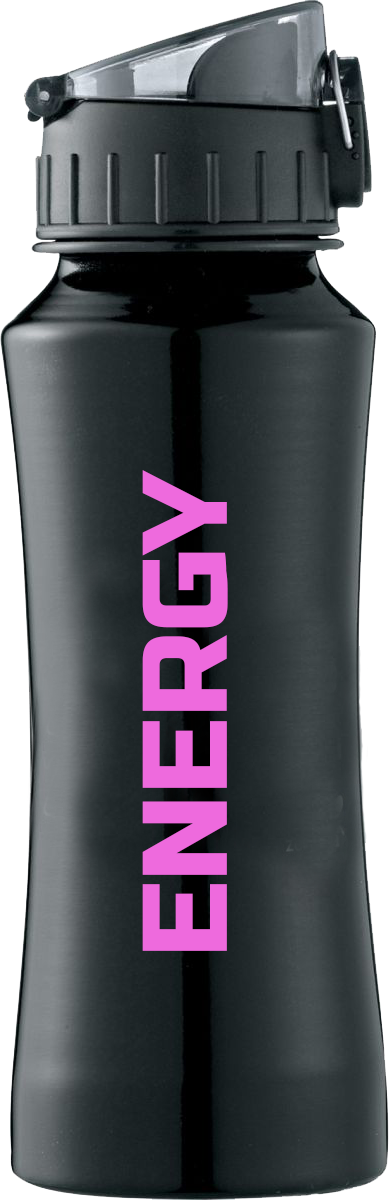
<style>
.page{position:relative;width:389px;height:1200px}
.page>*{position:absolute;margin:0}
.t1{font:120px "RussoOne";color:#ee6add}
</style>
<div class="page">
<p class="t1" style="left:142px;top:470px;width:86px;height:481px;rotate:-90deg">ENERGY</p>
</div>
